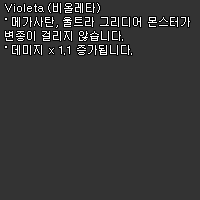
<style>
.page{position:relative;width:200px;height:200px;background:#333333}
.page>*{position:absolute;margin:0}
.t1{font:11px/14px "Dotum";color:#ffffff}
</style>
<div class="page">
<p class="t1" style="left:5px;top:3px;width:185px;height:52px">Violeta (비올레타)<br>˚ 메가사탄, 울트라 그리디어 몬스터가<br>변종이 걸리지 않습니다.<br>˚ 데미지 x 1.1 증가됩니다.</p>
</div>
